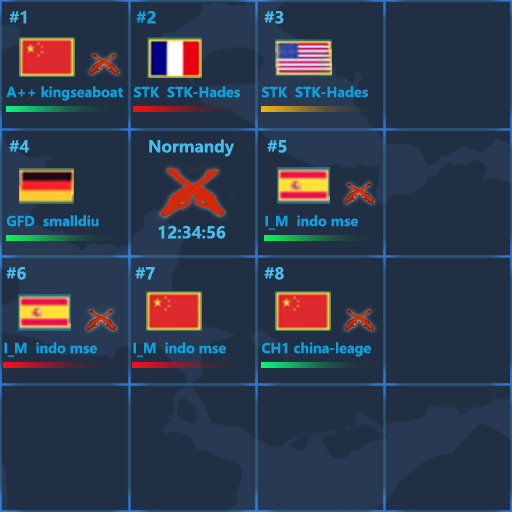
<style>
.page{position:relative;width:512px;height:512px;background:#202f43}
.page>*{position:absolute;margin:0}
.t1{font:16px "MicrosoftYaHei-Bold";color:#46b1d9}
.t2{font:16px "MicrosoftYaHei-Bold";color:#0aa2e1}
.t3{font:16px "MicrosoftYaHei-Bold";color:#45bdef}
.t4{font:13.3px "MicrosoftYaHei-Bold";color:#0aa2e1}
</style>
<div class="page">
<p class="t1" style="left:9px;top:10px;width:18px;height:14px">#1</p>
<p class="t2" style="left:136px;top:11px;width:20px;height:13px">#2</p>
<p class="t3" style="left:264px;top:11px;width:20px;height:13px">#3</p>
<p class="t4" style="left:6px;top:86px;width:117px;height:15px">A++ kingseaboat</p>
<p class="t4" style="left:134px;top:86px;width:106px;height:12px">STK  STK-Hades</p>
<p class="t4" style="left:262px;top:86px;width:106px;height:12px">STK  STK-Hades</p>
<p class="t3" style="left:9px;top:140px;width:21px;height:13px">#4</p>
<p class="t3" style="left:149px;top:139px;width:86px;height:18px">Normandy</p>
<p class="t3" style="left:267px;top:140px;width:20px;height:13px">#5</p>
<p class="t4" style="left:7px;top:215px;width:92px;height:12px">GFD  smalldiu</p>
<p class="t4" style="left:265px;top:215px;width:93px;height:15px">I_M  indo mse</p>
<p class="t3" style="left:158px;top:225px;width:68px;height:14px">12:34:56</p>
<p class="t3" style="left:6px;top:267px;width:20px;height:13px">#6</p>
<p class="t3" style="left:135px;top:267px;width:20px;height:13px">#7</p>
<p class="t3" style="left:264px;top:267px;width:20px;height:13px">#8</p>
<p class="t4" style="left:4px;top:342px;width:93px;height:15px">I_M  indo mse</p>
<p class="t4" style="left:133px;top:342px;width:93px;height:15px">I_M  indo mse</p>
<p class="t4" style="left:262px;top:342px;width:109px;height:15px">CH1 china-leage</p>
</div>
